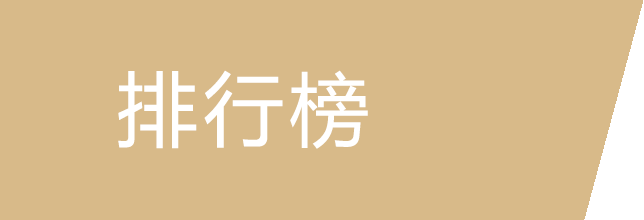
<style>
.page{position:relative;width:644px;height:220px;background:#d8ba89}
.page>*{position:absolute;margin:0}
.t1{font:80px "MicrosoftYaHei";letter-spacing:0.075em;color:#ffffff}
</style>
<div class="page">
<p class="t1" style="left:118px;top:70px;width:250px;height:79px">排行榜</p>
</div>
